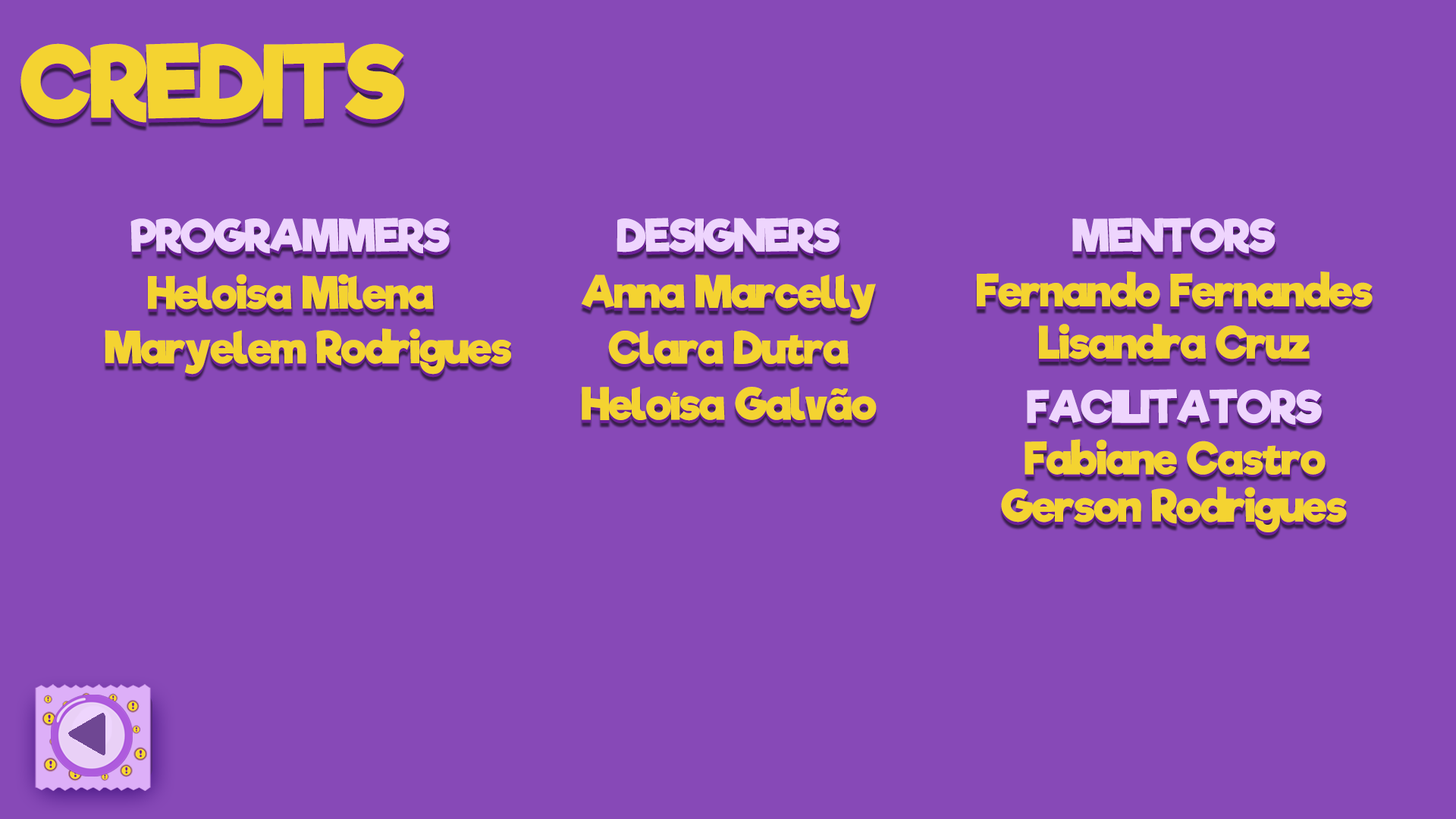
<style>
.page{position:relative;width:1456px;height:819px;background:#8749b7}
.page>*{position:absolute;margin:0}
.t1{font:167px "RifficFree-Bold";letter-spacing:-0.02em;color:#f4d331}
.t2{font:73.9px "RifficFree-Bold";letter-spacing:-0.02em;color:#eed5fd}
.t3{font:73.9px "RifficFree-Bold";letter-spacing:-0.02em;color:#f4d331}
</style>
<div class="page">
<p class="t1" style="left:20px;top:46px;width:384px;height:81px">CREDITS</p>
<p class="t1" style="left:20px;top:42px;width:384px;height:81px">CREDITS</p>
<p class="t2" style="left:130px;top:218px;width:320px;height:35px">PROGRAMMERS</p>
<p class="t2" style="left:131px;top:221px;width:319px;height:35px">PROGRAMMERS</p>
<p class="t2" style="left:617px;top:218px;width:222px;height:35px">DESIGNERS</p>
<p class="t2" style="left:617px;top:221px;width:223px;height:35px">DESIGNERS</p>
<p class="t2" style="left:1072px;top:218px;width:203px;height:35px">MENTORS</p>
<p class="t2" style="left:1073px;top:221px;width:203px;height:35px">MENTORS</p>
<p class="t3" style="left:148px;top:274px;width:286px;height:35px">Heloisa Milena</p>
<p class="t3" style="left:149px;top:277px;width:286px;height:35px">Heloisa Milena</p>
<p class="t3" style="left:581px;top:278px;width:295px;height:44px">Anna Marcelly</p>
<p class="t3" style="left:581px;top:275px;width:295px;height:43px">Anna Marcelly</p>
<p class="t3" style="left:977px;top:275px;width:396px;height:35px">Fernando Fernandes</p>
<p class="t3" style="left:977px;top:271px;width:396px;height:36px">Fernando Fernandes</p>
<p class="t3" style="left:105px;top:328px;width:406px;height:47px">Maryelem Rodrigues</p>
<p class="t3" style="left:608px;top:330px;width:241px;height:35px">Clara Dutra</p>
<p class="t3" style="left:1039px;top:326px;width:271px;height:36px">Lisandra Cruz</p>
<p class="t3" style="left:1039px;top:323px;width:271px;height:36px">Lisandra Cruz</p>
<p class="t3" style="left:105px;top:331px;width:406px;height:47px">Maryelem Rodrigues</p>
<p class="t3" style="left:608px;top:333px;width:241px;height:35px">Clara Dutra</p>
<p class="t3" style="left:582px;top:390px;width:295px;height:34px">Heloísa Galvão</p>
<p class="t3" style="left:582px;top:387px;width:295px;height:34px">Heloísa Galvão</p>
<p class="t2" style="left:1027px;top:389px;width:295px;height:36px">FACILITATORS</p>
<p class="t2" style="left:1028px;top:391px;width:295px;height:36px">FACILITATORS</p>
<p class="t3" style="left:1024px;top:439px;width:302px;height:36px">Fabiane Castro</p>
<p class="t3" style="left:1025px;top:441px;width:301px;height:36px">Fabiane Castro</p>
<p class="t3" style="left:1001px;top:490px;width:346px;height:45px">Gerson Rodrigues</p>
<p class="t3" style="left:1001px;top:487px;width:346px;height:45px">Gerson Rodrigues</p>
</div>
